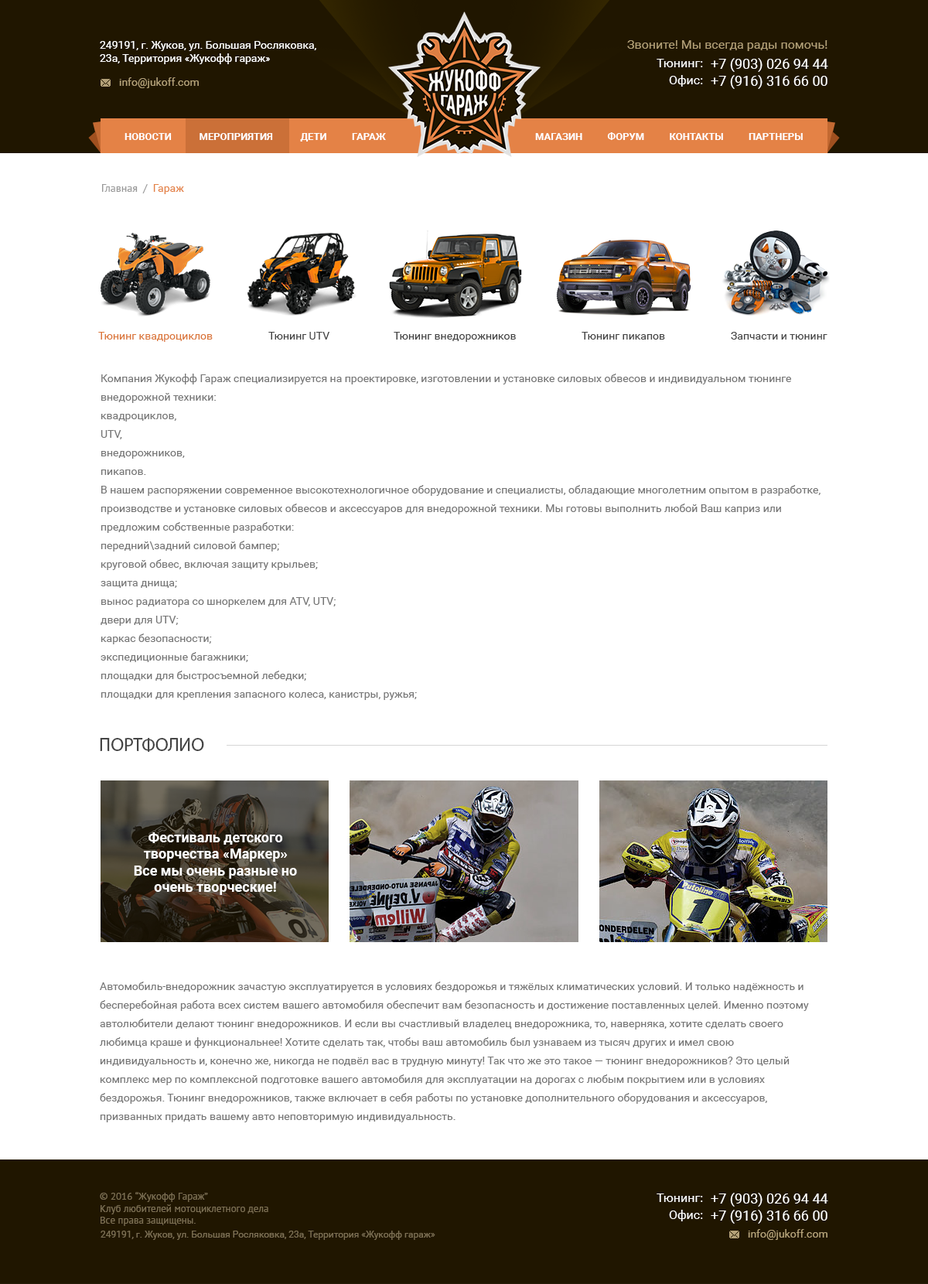
<style>
.page{position:relative;width:928px;height:1284px;background:#ffffff}
.page>*{position:absolute;margin:0}
.t1{font:10.8px "Roboto-Regular";color:#ffffff}
.t2{font:12.4px "Roboto-Regular";color:#b3a078}
.t3{font:12.4px "Roboto-Regular";color:#ffffff}
.t4{font:13.9px "Roboto-Regular";color:#ffffff;text-transform:uppercase}
.t5{font:10.8px "Roboto-Regular";color:#b3a078}
.t6{font:10.1px "Roboto-Bold";color:#ffffff;text-transform:uppercase}
.t7{font:10.8px "PTSans-Regular";color:#999999}
.t8{font:10.8px "Roboto-Regular";color:#e48246}
.t9{font:10.8px "Roboto-Regular";color:#db773a}
.t10{font:10.8px "Roboto-Regular";color:#444444}
.t11{font:10.8px/18.6px "Roboto-Regular";color:#777777}
.t12{font:18.6px "MyriadPro-Regular";color:#444444;text-transform:uppercase}
.t13{font:13.9px "Roboto-Bold";color:#ffffff}
.t14{font:10.1px "PTSans-Regular";color:#7d7055}
.t15{font:9.3px "Roboto-Regular";color:#7d7055}
</style>
<div class="page">
<p class="t1" style="left:100px;top:41px;width:216px;height:23px">249191, г. Жуков, ул. Большая Росляковка,<br>23а, Территория «Жукофф гараж»</p>
<p class="t2" style="left:627px;top:40px;width:201px;height:11px">Звоните! Мы всегда рады помочь!</p>
<p class="t3" style="left:657px;top:59px;width:46px;height:8px">Тюнинг:</p>
<p class="t4" style="left:711px;top:58px;width:118px;height:31px">+7 (903) 026 94 44<br>+7 (916) 316 66 00</p>
<p class="t5" style="left:119px;top:77px;width:80px;height:11px">info@jukoff.com</p>
<p class="t3" style="left:669px;top:75px;width:34px;height:12px">Офис:</p>
<p class="t6" style="left:125px;top:133px;width:261px;height:9px">Новости           Мероприятия           дети          Гараж</p>
<p class="t6" style="left:535px;top:132px;width:268px;height:8px">Магазин          Форум          Контакты          Партнеры</p>
<p class="t7" style="left:102px;top:184px;width:82px;height:10px">Главная  /  <span class="t8">Гараж</span></p>
<p class="t9" style="left:98px;top:332px;width:115px;height:10px">Тюнинг квадроциклов</p>
<p class="t10" style="left:268px;top:332px;width:62px;height:8px">Тюнинг UTV</p>
<p class="t10" style="left:394px;top:332px;width:122px;height:10px">Тюнинг внедорожников</p>
<p class="t10" style="left:582px;top:332px;width:83px;height:8px">Тюнинг пикапов</p>
<p class="t10" style="left:731px;top:332px;width:97px;height:8px">Запчасти и тюнинг</p>
<p class="t11" style="left:101px;top:374px;width:720px;height:326px">Компания Жукофф Гараж специализируется на проектировке, изготовлении и установке силовых обвесов и индивидуальном тюнинге внедорожной техники:<br>квадроциклов,<br>UTV,<br>внедорожников,<br>пикапов.<br>В нашем распоряжении современное высокотехнологичное оборудование и специалисты, обладающие многолетним опытом в разработке, производстве и установке силовых обвесов и аксессуаров для внедорожной техники. Мы готовы выполнить любой Ваш каприз или предложим собственные разработки:<br>передний\задний силовой бампер;<br>круговой обвес, включая защиту крыльев;<br>защита днища;<br>вынос радиатора со шноркелем для ATV, UTV;<br>двери для UTV;<br>каркас безопасности;<br>экспедиционные багажники;<br>площадки для быстросъемной лебедки;<br>площадки для крепления запасного колеса, канистры, ружья;</p>
<p class="t12" style="left:100px;top:738px;width:104px;height:14px">портфолио</p>
<p class="t13" style="left:134px;top:833px;width:163px;height:62px;text-align:center">Фестиваль детского творчества «Маркер» Все мы очень разные но очень творческие!</p>
<p class="t11" style="left:100px;top:982px;width:709px;height:141px">Автомобиль-внедорожник зачастую эксплуатируется в условиях бездорожья и тяжёлых климатических условий. И только надёжность и бесперебойная работа всех систем вашего автомобиля обеспечит вам безопасность и достижение поставленных целей. Именно поэтому автолюбители делают тюнинг внедорожников. И если вы счастливый владелец внедорожника, то, наверняка, хотите сделать своего любимца краше и функциональнее! Хотите сделать так, чтобы ваш автомобиль был узнаваем из тысяч других и имел свою индивидуальность и, конечно же, никогда не подвёл вас в трудную минуту! Так что же это такое — тюнинг внедорожников? Это целый комплекс мер по комплексной подготовке вашего автомобиля для эксплуатации на дорогах с любым покрытием или в условиях бездорожья. Тюнинг внедорожников, также включает в себя работы по установке дополнительного оборудования и аксессуаров, призванных придать вашему авто неповторимую индивидуальность.</p>
<p class="t14" style="left:100px;top:1192px;width:168px;height:34px">© 2016 “Жукофф Гараж”<br>Клуб любителей мотоциклетного дела<br>Все права защищены.</p>
<p class="t3" style="left:657px;top:1194px;width:46px;height:8px">Тюнинг:</p>
<p class="t4" style="left:711px;top:1193px;width:118px;height:31px">+7 (903) 026 94 44<br>+7 (916) 316 66 00</p>
<p class="t3" style="left:669px;top:1210px;width:34px;height:12px">Офис:</p>
<p class="t5" style="left:748px;top:1229px;width:80px;height:11px">info@jukoff.com</p>
<p class="t15" style="left:101px;top:1231px;width:335px;height:9px">249191, г. Жуков, ул. Большая Росляковка, 23а, Территория «Жукофф гараж»</p>
</div>
